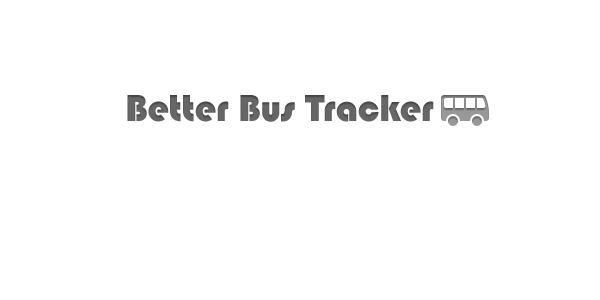
<style>
.page{position:relative;width:600px;height:300px;background:#ffffff}
.page>*{position:absolute;margin:0}
.t1{font:39px "Bauhaus93";color:#666666}
</style>
<div class="page">
<p class="t1" style="left:127px;top:95px;width:307px;height:27px">Better Bus Tracker</p>
</div>
